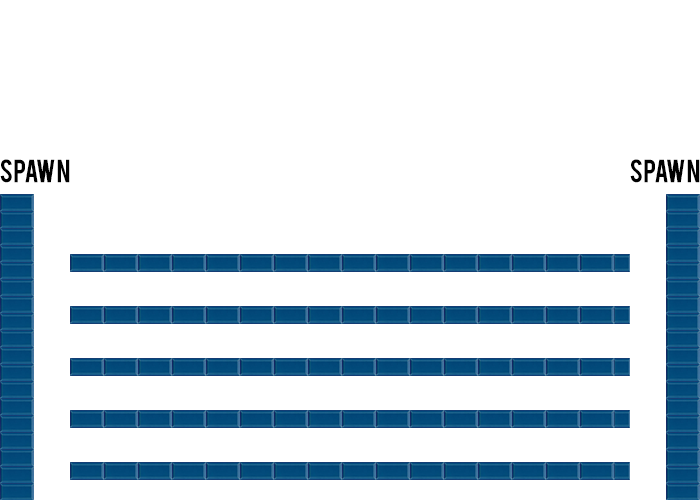
<style>
.page{position:relative;width:700px;height:500px;background:#ffffff}
.page>*{position:absolute;margin:0}
.t1{font:25px "Bebas";color:#000000;text-transform:uppercase}
</style>
<div class="page">
<p class="t1" style="left:0px;top:159px;width:70px;height:24px">Spawn</p>
<p class="t1" style="left:630px;top:159px;width:70px;height:24px">Spawn</p>
</div>
